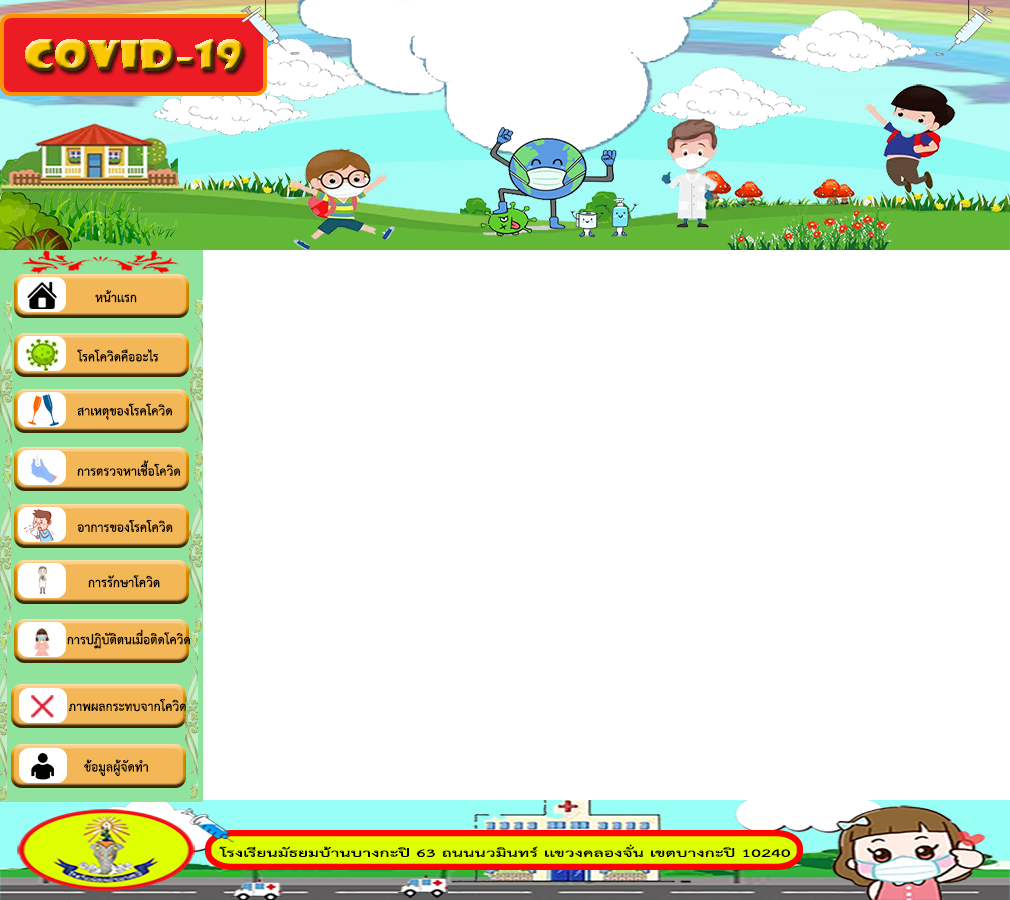
<style>
.page{position:relative;width:1010px;height:900px;background:#ffffff}
.page>*{position:absolute;margin:0}
.t1{font:18px "THSarabunPSK-Bold";color:#000000}
</style>
<div class="page">
<p class="t1" style="left:95px;top:290px;width:42px;height:13px">หน้าเเรก</p>
<p class="t1" style="left:77px;top:349px;width:82px;height:13px">โรคโควิดคืออะไร</p>
<p class="t1" style="left:77px;top:403px;width:95px;height:17px">สาเหตุของโรคโควิด</p>
<p class="t1" style="left:77px;top:460px;width:103px;height:16px">การตรวจหาเชื้อโควิด</p>
<p class="t1" style="left:77px;top:519px;width:96px;height:13px">อาการของโรคโควิด</p>
<p class="t1" style="left:88px;top:575px;width:72px;height:13px">การรักษาโควิด</p>
<p class="t1" style="left:67px;top:629px;width:123px;height:20px">การปฏิบัติตนเมื่อติดโควิด</p>
<p class="t1" style="left:68px;top:699px;width:118px;height:13px">ภาพผลกระทบจากโควิด</p>
<p class="t1" style="left:84px;top:759px;width:64px;height:17px">ข้อมูลผู้จัดทำ</p>
</div>
